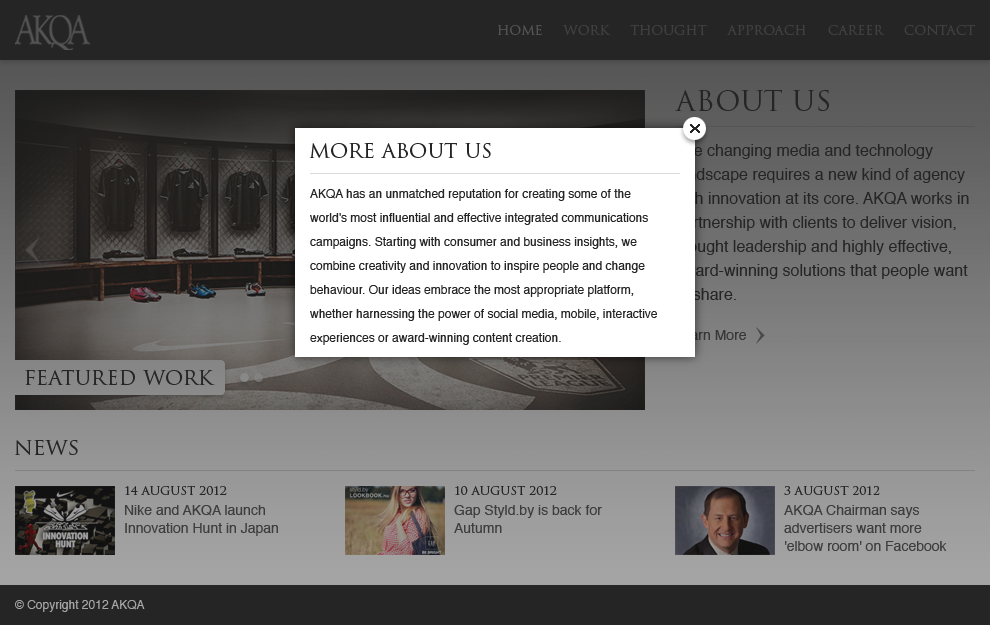
<style>
.page{position:relative;width:990px;height:625px}
.page>*{position:absolute;margin:0}
.t1{font:13px "TrajanPro-Regular";color:#404040;text-transform:uppercase}
.t2{font:28px "TrajanPro-Regular";color:#252525;text-transform:uppercase}
.t3{font:20px "TrajanPro-Regular";color:#252525;text-transform:uppercase}
.t4{font:16px/24px "Helvetica";color:#252525}
.t5{font:12px/24px "Helvetica";color:#252525}
.t6{font:12px "TrajanPro-Regular";color:#252525;text-transform:uppercase}
.t7{font:14px/18px "Helvetica";color:#515151}
.t8{font:12px "Helvetica";color:#a7a7a7}
</style>
<div class="page">
<p class="t1" style="left:498px;top:25px;width:477px;height:10px">home     work     thought     approach     career     contact</p>
<p class="t2" style="left:675px;top:90px;width:154px;height:21px">about us</p>
<p class="t3" style="left:309px;top:142px;width:182px;height:16px">more about us</p>
<p class="t4" style="left:675px;top:144px;width:294px;height:156px">The changing media and technology landscape requires a new kind of agency with innovation at its core. AKQA works in partnership with clients to deliver vision, thought leadership and highly effective, award-winning solutions that people want to share.</p>
<p class="t5" style="left:310px;top:189px;width:347px;height:156px">AKQA has an unmatched reputation for creating some of the world's most influential and effective integrated communications campaigns. Starting with consumer and business insights, we combine creativity and innovation to inspire people and change behaviour. Our ideas embrace the most appropriate platform, whether harnessing the power of social media, mobile, interactive experiences or award-winning content creation.</p>
<p class="t3" style="left:25px;top:369px;width:190px;height:17px">Featured Work</p>
<p class="t3" style="left:15px;top:440px;width:63px;height:15px">News</p>
<p class="t6" style="left:125px;top:486px;width:102px;height:9px">14 august 2012</p>
<p class="t6" style="left:455px;top:486px;width:102px;height:9px">10 august 2012</p>
<p class="t6" style="left:784px;top:486px;width:96px;height:9px">3 august 2012</p>
<p class="t7" style="left:125px;top:505px;width:153px;height:31px">Nike and AKQA launch <br>Innovation Hunt in Japan</p>
<p class="t7" style="left:454px;top:505px;width:148px;height:28px">Gap Styld.by is back for <br>Autumn</p>
<p class="t7" style="left:784px;top:505px;width:163px;height:46px">AKQA Chairman says <br>advertisers want more <br>'elbow room' on Facebook</p>
<p class="t8" style="left:15px;top:600px;width:130px;height:12px">© Copyright 2012 AKQA</p>
</div>
